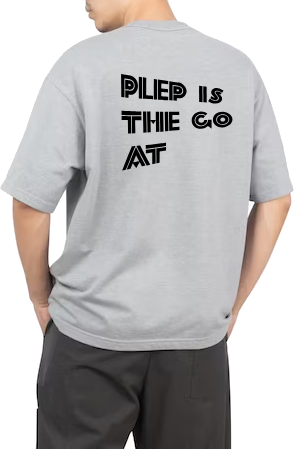
<style>
.page{position:relative;width:304px;height:449px;background:#ffffff}
.page>*{position:absolute;margin:0}
.t1{font:24px "FortySecondStreetHB";color:#000000}
</style>
<div class="page">
<p class="t1" style="left:121px;top:73px;width:112px;height:98px">plep is <br>the go<br>at</p>
</div>
